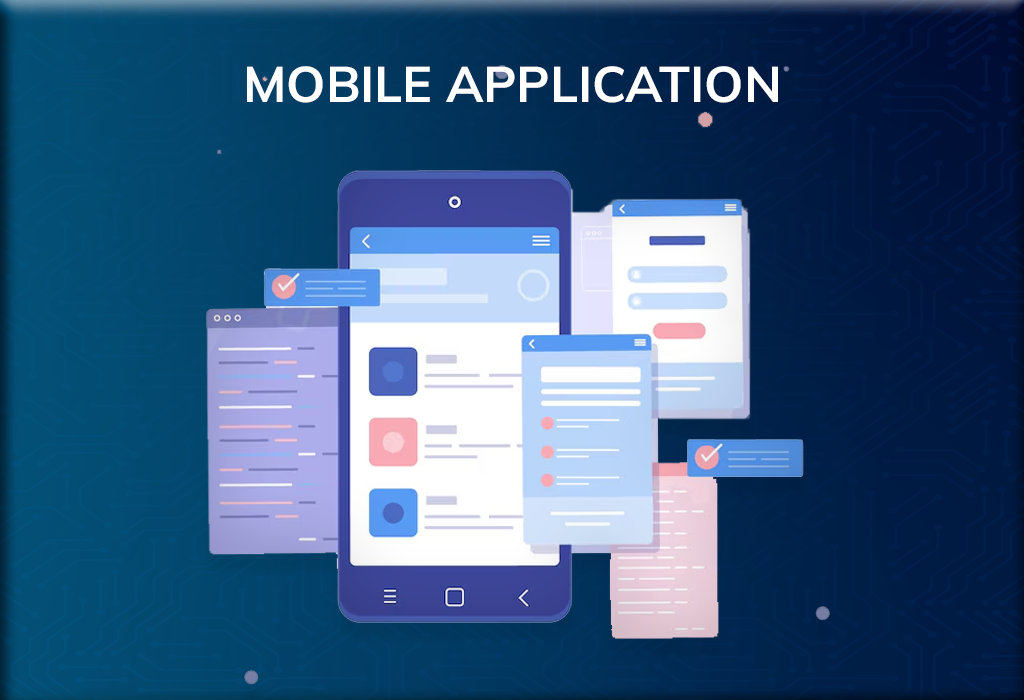
<style>
.page{position:relative;width:1024px;height:700px}
.page>*{position:absolute;margin:0}
.t1{font:50px "Mulish-Bold";color:#ffffff;text-transform:uppercase}
</style>
<div class="page">
<p class="t1" style="left:247px;top:66px;width:531px;height:37px">Mobile Application</p>
</div>
